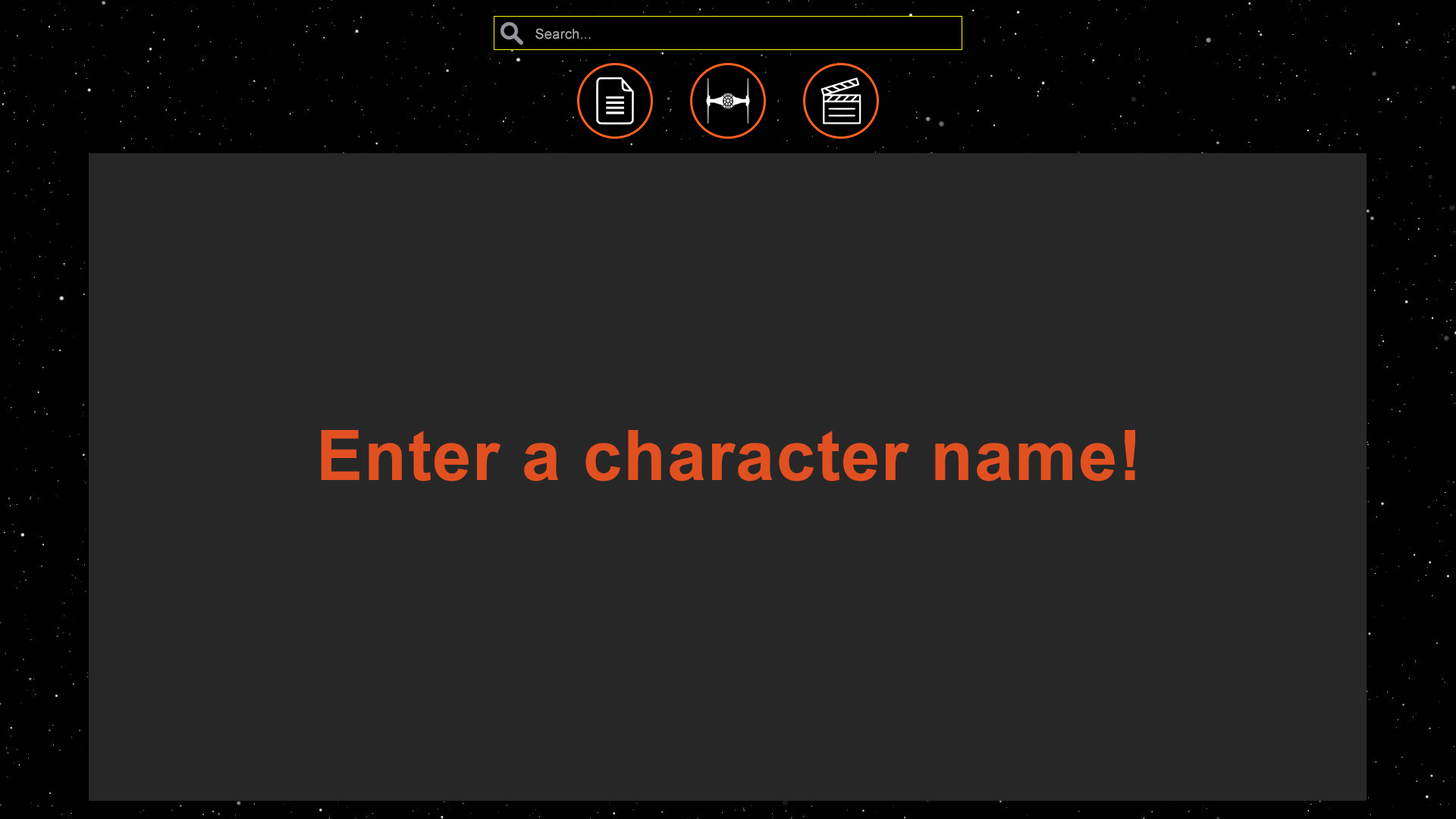
<style>
.page{position:relative;width:1456px;height:819px;background:#282727}
.page>*{position:absolute;margin:0}
.t1{font:13.6px "ArialMT";letter-spacing:0.02em;color:#b3b3b3}
.t2{font:69.8px "Arial-BoldMT";letter-spacing:0.02em;color:#e15021}
</style>
<div class="page">
<p class="t1" style="left:535px;top:28px;width:56px;height:11px">Search...</p>
<p class="t2" style="left:321px;top:430px;width:814px;height:52px">Enter a character name!</p>
</div>
